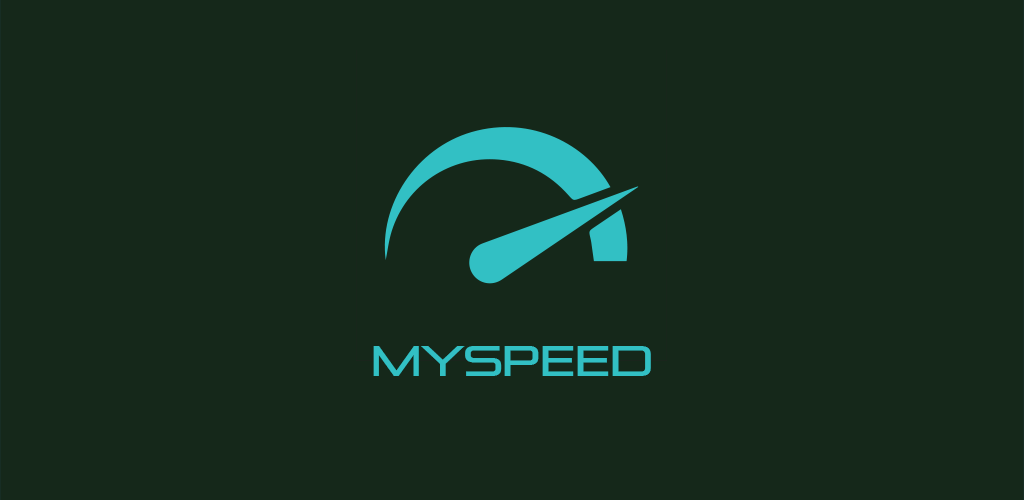
<style>
.page{position:relative;width:1024px;height:500px;background:#15281a}
.page>*{position:absolute;margin:0}
.t1{font:41.9px "PirulenRg-Regular";color:#32c0c4}
</style>
<div class="page">
<p class="t1" style="left:373px;top:346px;width:278px;height:30px">mySpeed</p>
</div>
